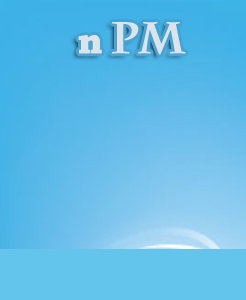
<style>
.page{position:relative;width:246px;height:300px}
.page>*{position:absolute;margin:0}
.t1{font:44px "CharlemagneStd-Bold";letter-spacing:-0.05em;color:#dee3e9;font-weight:bold}
.t2{font:38.5px "ChaparralPro-Bold";letter-spacing:-0.05em;color:#dee3e9;font-weight:bold}
</style>
<div class="page">
<p class="t1" style="left:112px;top:22px;width:74px;height:33px">PM</p>
<p class="t2" style="left:78px;top:35px;width:24px;height:19px">n</p>
</div>
